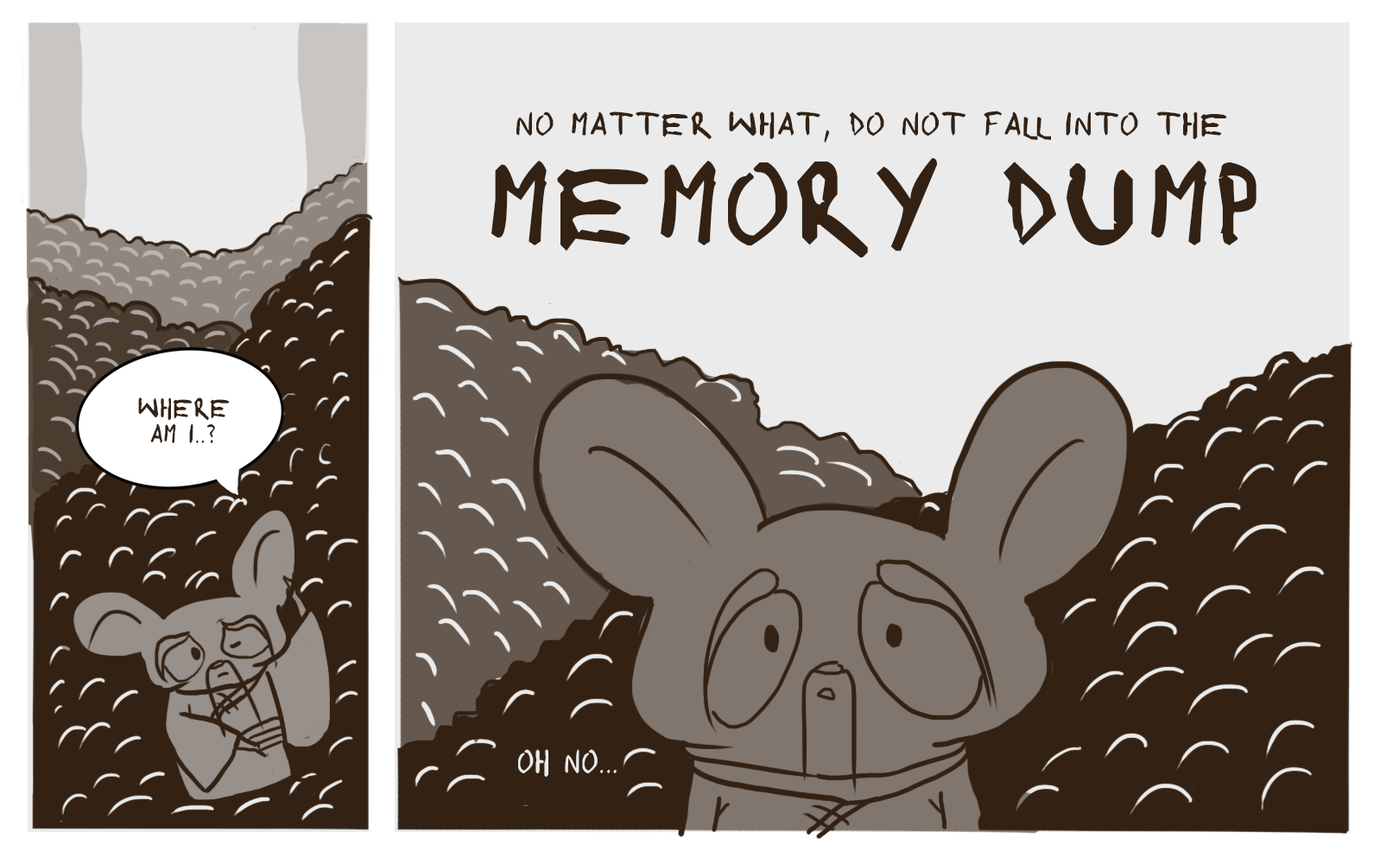
<style>
.page{position:relative;width:1380px;height:864px;background:#ebebeb}
.page>*{position:absolute;margin:0}
.t1{font:25.9px "shonenpunk!custom";letter-spacing:0.075em;color:#332214}
.t2{font:91.4px "shonenpunk!custom";letter-spacing:0.075em;color:#332214}
.t3{font:21.2px "shonenpunk!custom";letter-spacing:0.075em;color:#332214;scale:0.88 1}
.t4{font:25.9px "shonenpunk!custom";letter-spacing:0.075em;color:#ebebeb;scale:0.88 1}
</style>
<div class="page">
<p class="t1" style="left:517px;top:111px;width:711px;height:32px">no matter what, do not fall into the</p>
<p class="t2" style="left:492px;top:157px;width:765px;height:100px">memory dump</p>
<p class="t3" style="left:138px;top:397px;width:92px;height:46px;text-align:center">where<br>am i..?</p>
<p class="t4" style="left:518px;top:749px;width:99px;height:28px">oh no...</p>
</div>
